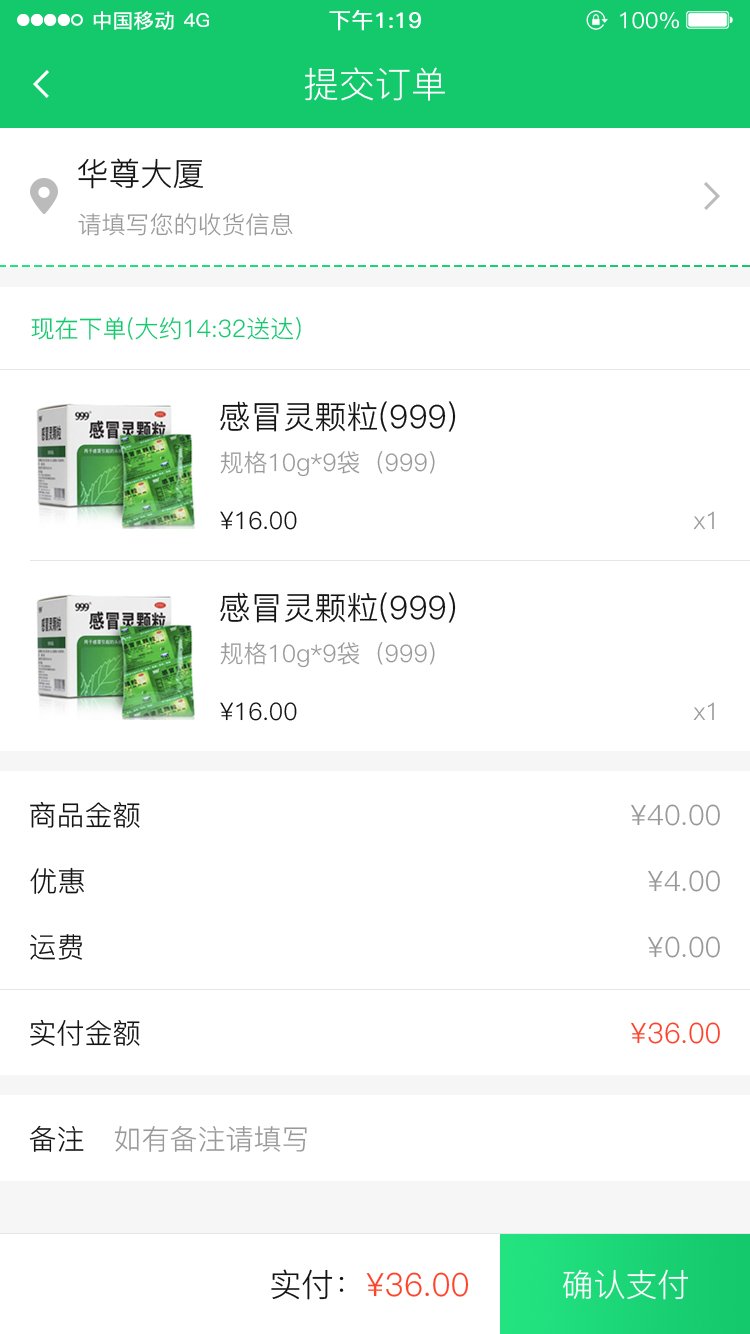
<style>
.page{position:relative;width:750px;height:1334px;background:#ffffff}
.page>*{position:absolute;margin:0}
.t1{font:36px "PingFang-SC-Regular";color:#ffffff}
.t2{font:32px "PingFang-SC-Regular";color:#141414}
.t3{font:24px "PingFang-SC-Regular";color:#999999}
.t4{font:24px "PingFang-SC-Regular";color:#14c86c}
.t5{font:24px "PingFang-SC-Regular";color:#141414}
.t6{font:28px "PingFang-SC-Regular";color:#141414}
.t7{font:28px "PingFang-SC-Regular";color:#999999}
.t8{font:28px "PingFang-SC-Regular";color:#fd432a}
.t9{font:32px "PingFang-SC-Regular";color:#fd432a}
.t10{font:32px "PingFang-SC-Regular";color:#ffffff}
</style>
<div class="page">
<p class="t1" style="left:304px;top:67px;width:141px;height:34px">提交订单</p>
<p class="t2" style="left:78px;top:158px;width:125px;height:31px">华尊大厦</p>
<p class="t3" style="left:78px;top:213px;width:215px;height:23px">请填写您的收货信息</p>
<p class="t4" style="left:31px;top:317px;width:270px;height:23px">现在下单(大约14:32送达)</p>
<p class="t2" style="left:220px;top:401px;width:236px;height:31px">感冒灵颗粒(999)</p>
<p class="t3" style="left:220px;top:451px;width:215px;height:26px">规格10g*9袋（999）</p>
<p class="t5" style="left:220px;top:511px;width:77px;height:19px">¥16.00</p>
<p class="t3" style="left:693px;top:511px;width:21px;height:19px">x1</p>
<p class="t2" style="left:220px;top:592px;width:236px;height:31px">感冒灵颗粒(999)</p>
<p class="t3" style="left:220px;top:642px;width:215px;height:26px">规格10g*9袋（999）</p>
<p class="t5" style="left:220px;top:702px;width:77px;height:19px">¥16.00</p>
<p class="t3" style="left:693px;top:702px;width:21px;height:19px">x1</p>
<p class="t6" style="left:30px;top:801px;width:110px;height:27px">商品金额</p>
<p class="t7" style="left:631px;top:804px;width:89px;height:22px">¥40.00</p>
<p class="t6" style="left:30px;top:867px;width:54px;height:27px">优惠</p>
<p class="t7" style="left:648px;top:870px;width:72px;height:22px">¥4.00</p>
<p class="t6" style="left:30px;top:934px;width:52px;height:26px">运费</p>
<p class="t7" style="left:648px;top:936px;width:72px;height:22px">¥0.00</p>
<p class="t6" style="left:30px;top:1019px;width:110px;height:27px">实付金额</p>
<p class="t8" style="left:631px;top:1022px;width:89px;height:22px">¥36.00</p>
<p class="t6" style="left:29px;top:1125px;width:55px;height:27px">备注</p>
<p class="t7" style="left:114px;top:1125px;width:193px;height:27px">如有备注请填写</p>
<p class="t9" style="left:271px;top:1269px;width:198px;height:31px"><span class="t2">实付：</span>¥36.00</p>
<p class="t10" style="left:563px;top:1269px;width:126px;height:31px">确认支付</p>
</div>
